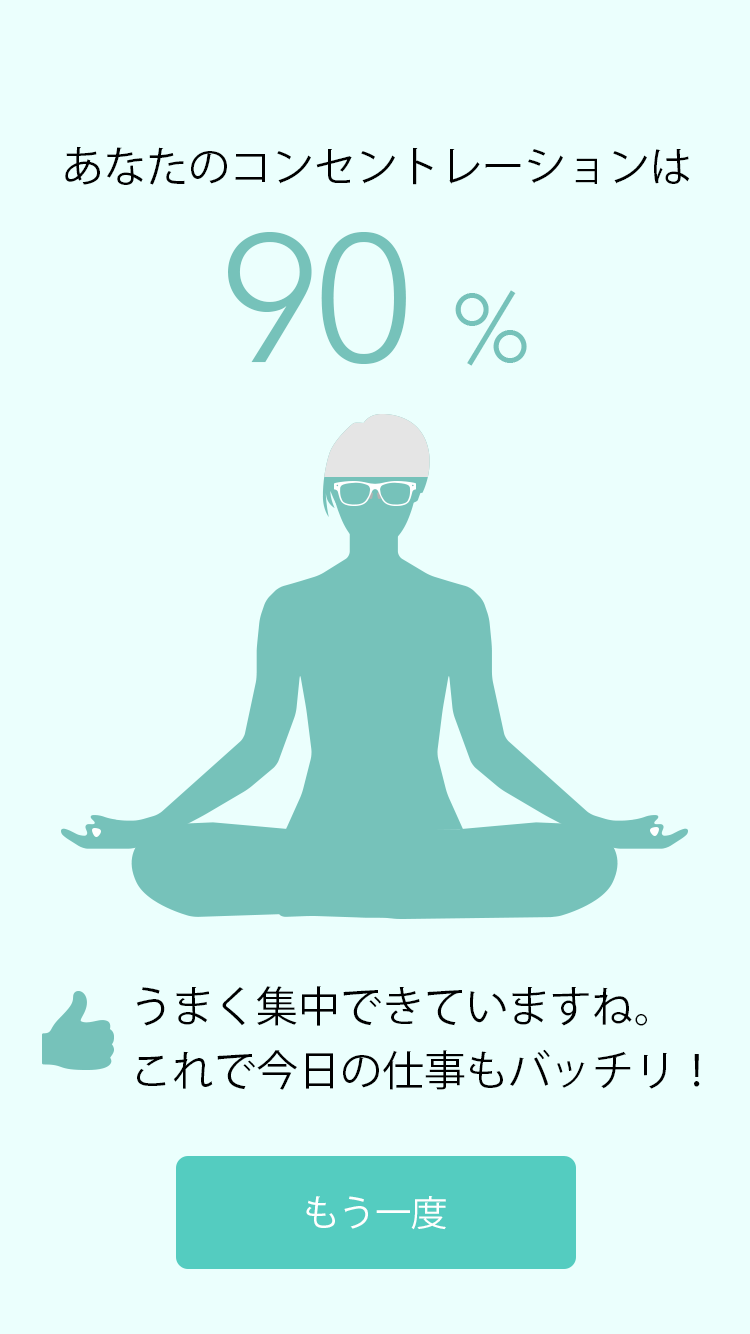
<style>
.page{position:relative;width:750px;height:1334px;background:#ebfffd}
.page>*{position:absolute;margin:0}
.t1{font:42px "KozGoPr6N-Regular";color:#000000}
.t2{font:180px "Avenir-Light";color:#76c2ba}
.t3{font:96px "Avenir-Light";color:#76c2ba}
.t4{font:42px/64px "KozGoPr6N-Regular";color:#000000}
.t5{font:36px "KozGoPr6N-Regular";color:#ffffff}
</style>
<div class="page">
<p class="t1" style="left:65px;top:146px;width:625px;height:39px">あなたのコンセントレーションは</p>
<p class="t2" style="left:228px;top:232px;width:299px;height:134px">90 <span class="t3">%</span></p>
<p class="t4" style="left:136px;top:986px;width:564px;height:104px">うまく集中できていますね。<br>これで今日の仕事もバッチリ！</p>
<p class="t5" style="left:306px;top:1196px;width:140px;height:34px">もう一度</p>
</div>
